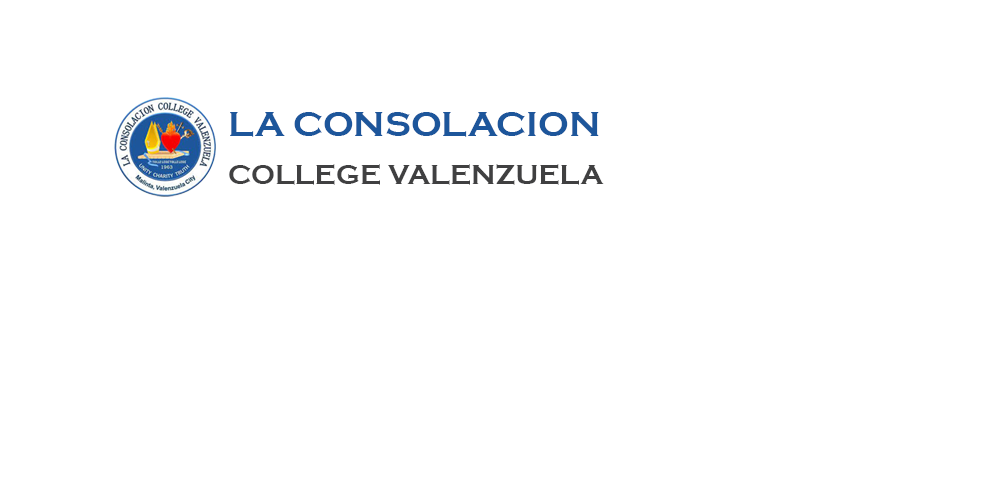
<style>
.page{position:relative;width:1000px;height:500px;background:#ffffff}
.page>*{position:absolute;margin:0}
.t1{font:36px "CopperplateGothic-Bold";color:#1d569b}
.t2{font:28px "CopperplateGothic-Bold";color:#404041}
</style>
<div class="page">
<p class="t1" style="left:230px;top:112px;width:369px;height:25px">LA CONSOLACION</p>
<p class="t2" style="left:229px;top:164px;width:375px;height:21px">COLLEGE VALENZUELA</p>
</div>
